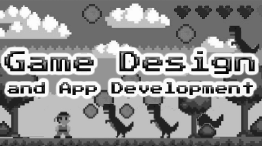
<style>
.page{position:relative;width:262px;height:146px}
.page>*{position:absolute;margin:0}
.t1{font:23px "PressStart2P-Regular"}
.t2{font:13px "PressStart2P-Regular"}
</style>
<div class="page">
<p class="t1" style="left:4px;top:51px;width:251px;height:23px">Game Design</p>
<p class="t2" style="left:7px;top:82px;width:246px;height:13px">and App Development</p>
</div>
